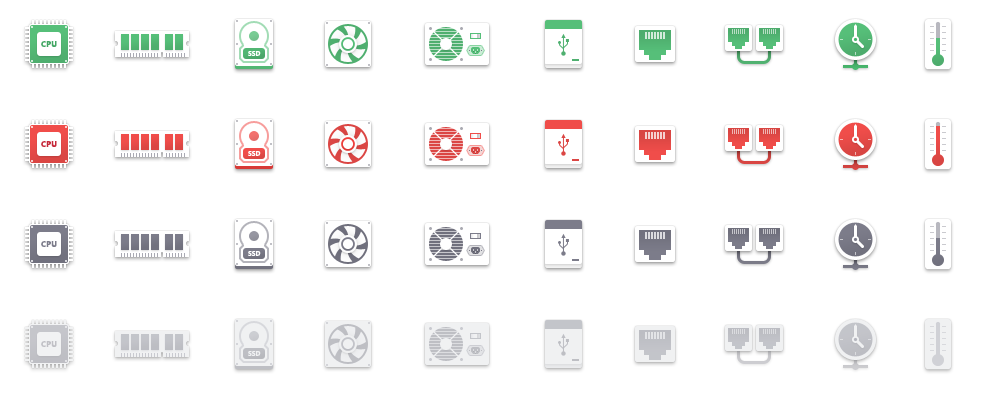
<style>
.page{position:relative;width:1000px;height:400px;background:#ffffff}
.page>*{position:absolute;margin:0}
.t1{font:8px "SegoeUI-Bold";letter-spacing:0.025em;color:#42a663}
.t2{font:6.7px "SegoeUI-Bold";color:#ffffff}
.t3{font:8px "SegoeUI-Bold";letter-spacing:0.025em;color:#c52839}
.t4{font:8px "SegoeUI-Bold";letter-spacing:0.025em;color:#7b7b8a}
.t5{font:8px "SegoeUI-Bold";letter-spacing:0.025em;color:#c0c0c5}
</style>
<div class="page">
<p class="t1" style="left:41px;top:41px;width:16px;height:6px">CPU</p>
<p class="t2" style="left:248px;top:51px;width:13px;height:5px">SSD</p>
<p class="t3" style="left:41px;top:141px;width:16px;height:6px">CPU</p>
<p class="t2" style="left:248px;top:151px;width:13px;height:5px">SSD</p>
<p class="t4" style="left:41px;top:241px;width:16px;height:6px">CPU</p>
<p class="t2" style="left:248px;top:251px;width:13px;height:5px">SSD</p>
<p class="t5" style="left:41px;top:341px;width:16px;height:6px">CPU</p>
<p class="t2" style="left:248px;top:351px;width:13px;height:5px">SSD</p>
</div>
